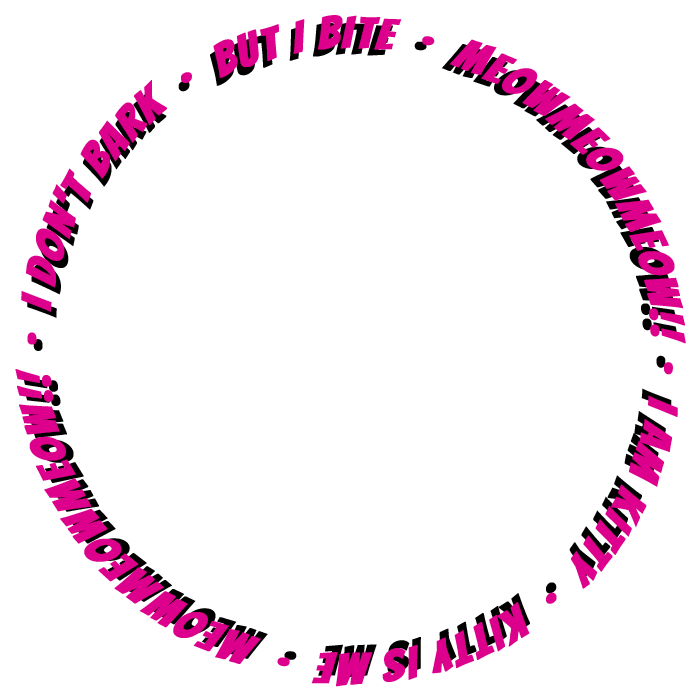
<style>
.page{position:relative;width:700px;height:700px;background:#ffffff}
.page>*{position:absolute;margin:0}
.t1{font:43.8px/333.3px "Bangers-Regular";letter-spacing:0.02em;color:#dc008c;text-transform:uppercase;font-weight:bold;scale:1.12 1}
.t2{font:42.8px "Bangers-Regular";letter-spacing:0.02em;text-transform:uppercase;font-weight:bold;scale:1.12 1}
</style>
<div class="page">
<p class="t1" style="left:15px;top:15px;width:671px;height:672px;text-align:center">·  i am kitty  ·  kitty is me  ·  MEOWMEOWMEOW!!  ·  I DON'T BARK  ·  BUT I BITE  ·  MEOWMEOWMEOW!!</p>
<p class="t2" style="left:23px;top:22px;width:655px;height:657px;rotate:-1deg">·  i am kitty  ·  kitty is me  ·  MEOWMEOWMEOW!!  ·  I DON'T BARK  ·  BUT I BITE  ·  MEOWMEOWMEOW!!</p>
</div>
